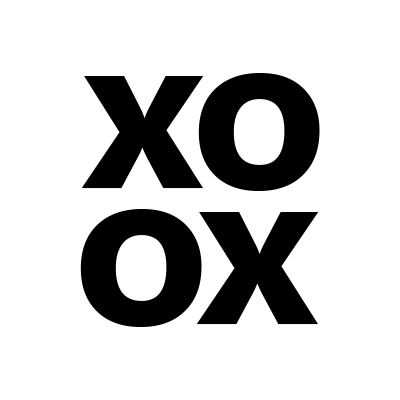
<style>
.page{position:relative;width:400px;height:400px;background:#ffffff}
.page>*{position:absolute;margin:0}
.t1{font:222.7px "SegoeUI-Bold";letter-spacing:-0.04em;color:#000000}
</style>
<div class="page">
<p class="t1" style="left:81px;top:73px;width:239px;height:118px">xo</p>
<p class="t1" style="left:80px;top:209px;width:239px;height:118px">ox</p>
</div>
